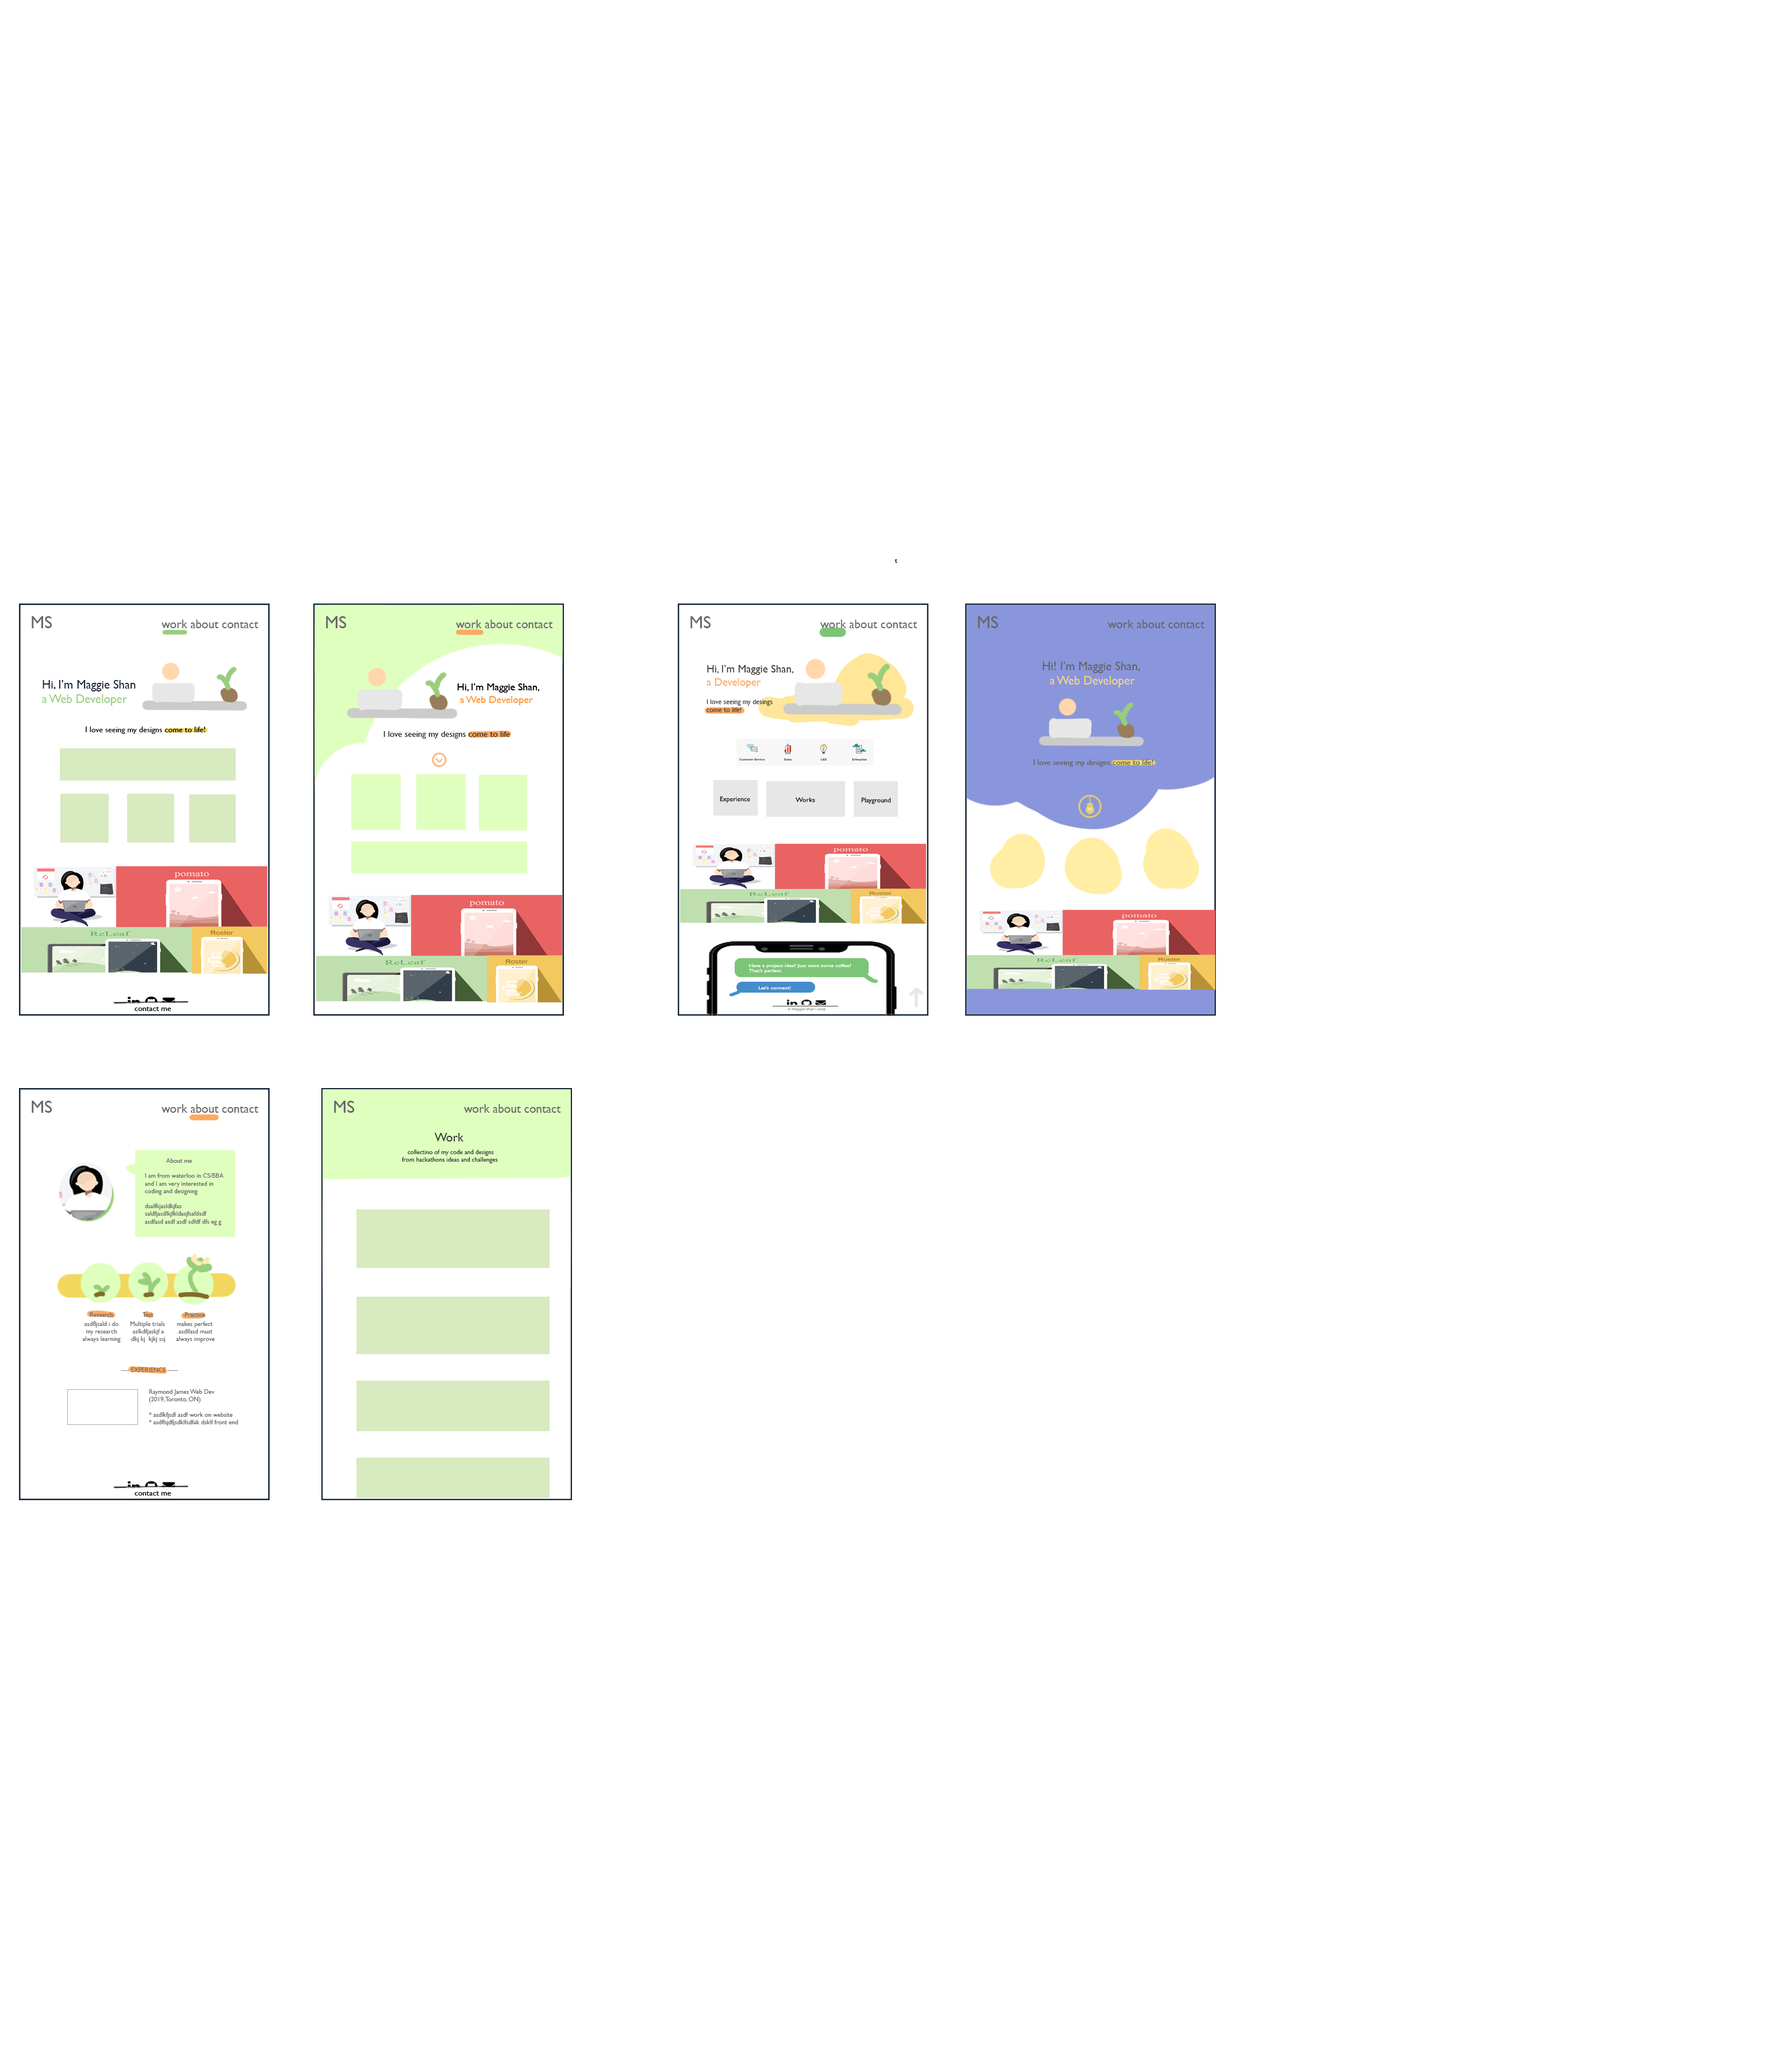
<style>
.page{position:relative;width:1766px;height:2060px;background:#ffffff}
.page>*{position:absolute;margin:0}
.t1{font:6.8px "GillSansMT";color:#121212}
.t2{font:12.1px "GillSansMT";color:#686868}
.t3{font:17.8px "GillSansMT";color:#686868}
.t4{font:6.9px/9.2px "GillSansMT";color:#424242}
.t5{font:10.9px "GillSansMT";color:#424242}
.t6{font:10.9px "GillSansMT";color:#fcaa61}
.t7{font:10.9px/9.2px "GillSansMT";color:#fcaa61}
.t8{font:6.9px "GillSansMT";color:#424242}
.t9{font:12.1px "GillSansMT";color:#162638}
.t10{font:12.1px "GillSansMT";color:#9bd080}
.t11{font:8px "GillSansMT";color:#000000}
.t12{font:6.4px "GillSansMT";color:#121212;scale:1.11 1}
.t13{font:4.2px "GillSansMT";color:#ffffff;scale:1.38 1}
.t14{font:6.3px "GillSansMT";color:#393939}
.t15{font:12.1px "GillSansMT";color:#393939}
.t16{font:12.1px/12.6px "GillSansMT";color:#393939}
.t17{font:6.3px/12.6px "GillSansMT";color:#393939}
.t18{font:6.3px "GillSansMT";color:#686868}
.t19{font:6.3px "GillSansMT";color:#6b6b6b}
.t20{font:6.3px "GillSansMT";color:#666666}
</style>
<div class="page">
<p class="t1" style="left:894px;top:559px;width:3px;height:4px">t</p>
<p class="t2" style="left:32px;top:616px;width:227px;height:12px"><span class="t3">MS                      </span>work about contact</p>
<p class="t4" style="left:706px;top:665px;width:88px;height:47px"><span class="t5">Hi, I’m Maggie Shan,<br></span><span class="t6">a Deve</span><span class="t7">loper<br></span><br>I love seeing my desings<br><span class="t8">come to life!</span></p>
<p class="t9" style="left:42px;top:680px;width:94px;height:26px">Hi, I’m Maggie Shan<br><span class="t10">a Web Developer</span></p>
<p class="t11" style="left:86px;top:727px;width:119px;height:7px">I love seeing my designs come to life!</p>
<p class="t1" style="left:720px;top:796px;width:30px;height:7px">Experience</p>
<p class="t12" style="left:796px;top:797px;width:19px;height:5px">Works</p>
<p class="t1" style="left:861px;top:797px;width:30px;height:7px">Playground</p>
<p class="t13" style="left:748px;top:964px;width:103px;height:9px">Have a project idea? Just want some coffee?<br>That’s perfect.</p>
<p class="t13" style="left:758px;top:986px;width:33px;height:4px">Let’s connect!</p>
<p class="t11" style="left:135px;top:1007px;width:36px;height:4px">contact me</p>
<p class="t2" style="left:32px;top:1101px;width:227px;height:12px"><span class="t3">MS                      </span>work about contact</p>
<p class="t2" style="left:334px;top:1101px;width:227px;height:12px"><span class="t3">MS                      </span>work about contact</p>
<p class="t14" style="left:402px;top:1133px;width:96px;height:30px;text-align:center"><span class="t15">Wo</span><span class="t16">rk </span><span class="t17"><br>collectino of my code </span>and designs<br>from hackathons ideas and challenges</p>
<p class="t18" style="left:145px;top:1158px;width:79px;height:68px;text-align:center">About me <br><br>I am from waterloo in CS/BBA<br>and I am very interested in <br>coding and designing <br><br>dsalfkjasldkjfas<br>saldfjasdlkjfkldasjfsafdsdf<br>asdfasd asdf asdf sdfdf dfs eg g</p>
<p class="t19" style="left:90px;top:1312px;width:115px;height:5px">Research            Test                  Practice</p>
<p class="t19" style="left:82px;top:1322px;width:39px;height:21px;text-align:center">asdfljsald i do <br>my research <br>always learning</p>
<p class="t19" style="left:130px;top:1322px;width:36px;height:21px;text-align:center">Multiple trials <br>aslkdfjaskjf a<br>dkj kj  kjkj ssj</p>
<p class="t19" style="left:176px;top:1322px;width:39px;height:21px;text-align:center">makes perfect <br>asdlfasd must<br>always improve</p>
<p class="t19" style="left:121px;top:1368px;width:57px;height:4px">---- EXPERIENCE -----</p>
<p class="t20" style="left:149px;top:1389px;width:89px;height:37px">Raymond James Web Dev <br>(2019, Toronto, ON) <br><br>* asdlkfjsdl asdf work on website <br>* asdflsjdfjsdklfsdfak dsklf front end</p>
<p class="t11" style="left:135px;top:1491px;width:36px;height:5px">contact me</p>
</div>
